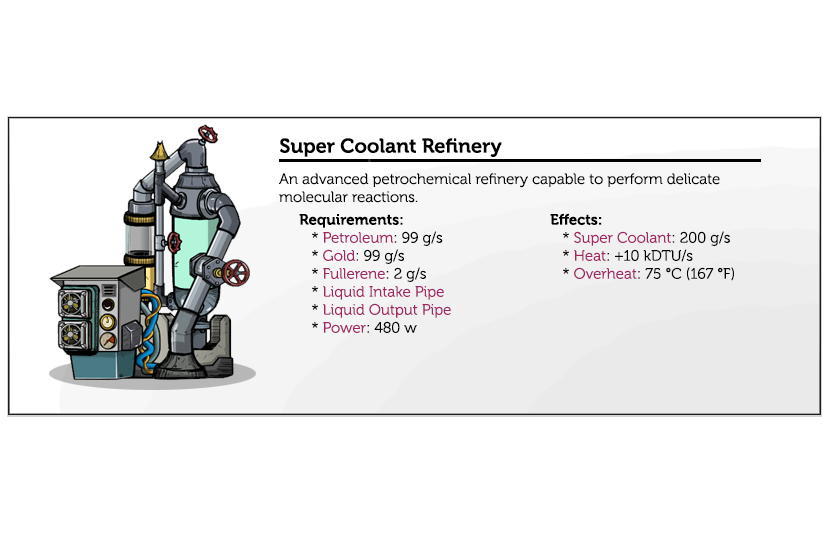
<style>
.page{position:relative;width:830px;height:550px;background:#ffffff}
.page>*{position:absolute;margin:0}
.t1{font:20px "Museo-700";color:#000000}
.t2{font:15px "Museo-300";color:#000000}
.t3{font:15px "Museo-700";color:#000000}
.t4{font:15px "Museo-300";color:#a12864}
</style>
<div class="page">
<p class="t1" style="left:279px;top:138px;width:223px;height:19px">Super Coolant Refinery</p>
<p class="t2" style="left:279px;top:173px;width:441px;height:30px">An advanced petrochemical refinery capable to perform delicate molecular reactions.</p>
<p class="t2" style="left:299px;top:214px;width:152px;height:119px"><span class="t3">Requirements:</span><br>   * <span class="t4">Petroleum</span>: 99 g/s                    <br>   * <span class="t4">Gold</span>: 99 g/s<br>   * <span class="t4">Fullerene</span>: 2 g/s<br>   * <span class="t4">Liquid Intake Pipe<br></span>   * <span class="t4">Liquid Output Pipe<br></span>   * <span class="t4">Power</span>: 480 w</p>
<p class="t2" style="left:550px;top:213px;width:184px;height:68px"><span class="t3">Effects:</span><br>   * <span class="t4">Super Coolant</span>: 200 g/s                    <br>   * <span class="t4">Heat</span>: +10 kDTU/s<br>   * <span class="t4">Overheat</span>: 75 °C (167 °F)</p>
</div>
